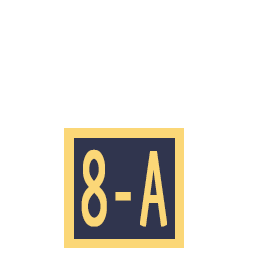
<style>
.page{position:relative;width:256px;height:256px;background:#ffffff}
.page>*{position:absolute;margin:0}
.t1{font:110px "OratorStd";letter-spacing:-0.14em;color:#fbd777;font-weight:bold;scale:0.55 1}
</style>
<div class="page">
<p class="t1" style="left:81px;top:149px;width:86px;height:78px;rotate:180deg">A-8</p>
</div>
